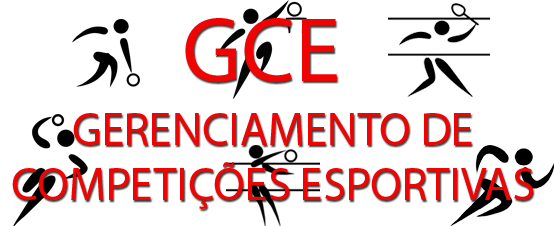
<style>
.page{position:relative;width:554px;height:226px;background:#ffffff}
.page>*{position:absolute;margin:0}
.t1{font:92px "MyriadPro-Regular";color:#f00404}
.t2{font:46px "MyriadPro-Regular";color:#f00404}
</style>
<div class="page">
<p class="t1" style="left:185px;top:18px;width:152px;height:64px">GCE</p>
<p class="t2" style="left:12px;top:113px;width:521px;height:96px;text-align:center">GERENCIAMENTO DE<br>COMPETIÇÕES ESPORTIVAS</p>
</div>
